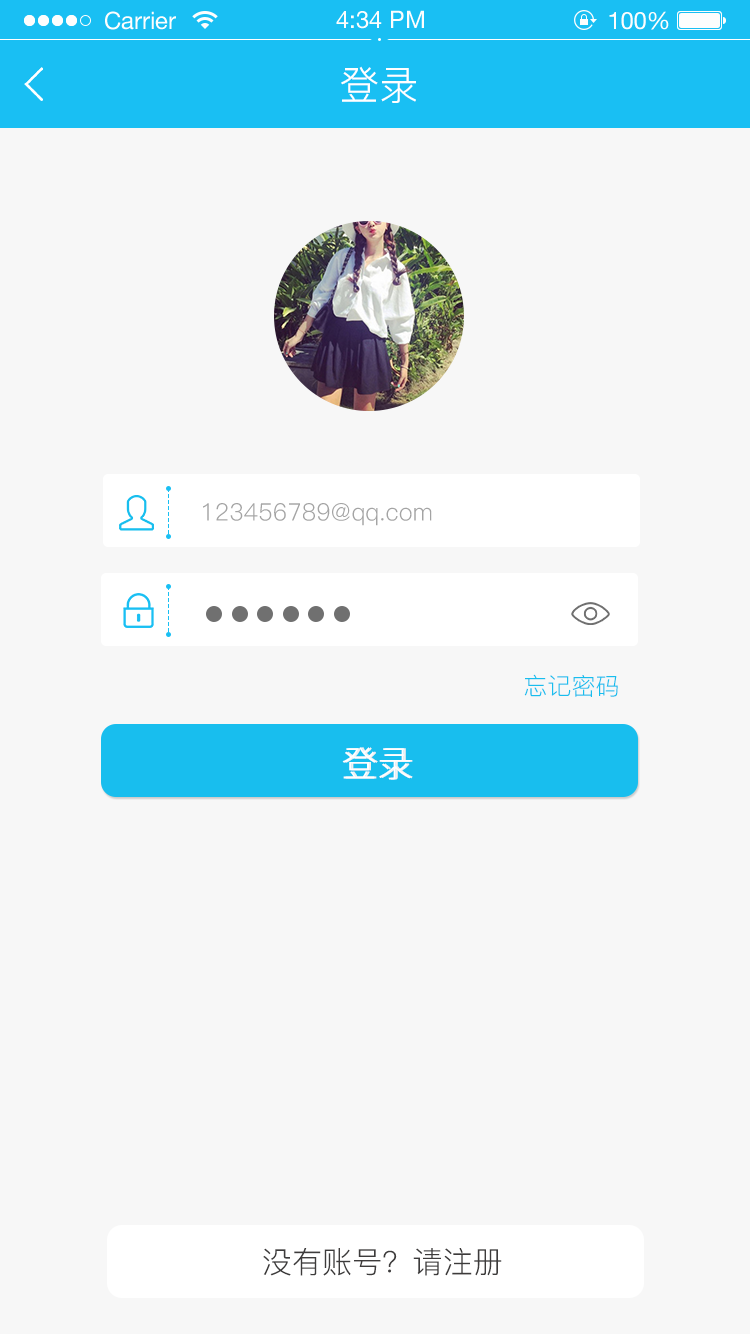
<style>
.page{position:relative;width:750px;height:1334px;background:#f7f7f7}
.page>*{position:absolute;margin:0}
.t1{font:40px "PingFang-SC-Regular";color:#ffffff}
.t2{font:24px "PingFang-SC-Regular";letter-spacing:0.005em;color:#a4a4a4}
.t3{font:24px "PingFang-SC-Regular";letter-spacing:0.005em;color:#18beee}
.t4{font:36px "PingFang-SC-Regular";color:#ffffff}
.t5{font:36px "PingFang-SC-Regular";color:#f2f1f1}
.t6{font:30px "PingFang-SC-Regular";letter-spacing:0.005em;color:#3d3b3b}
</style>
<div class="page">
<p class="t1" style="left:341px;top:66px;width:75px;height:37px">登录</p>
<p class="t2" style="left:203px;top:503px;width:229px;height:23px">123456789@qq.com</p>
<p class="t3" style="left:524px;top:674px;width:94px;height:23px">忘记密码</p>
<p class="t4" style="left:342px;top:747px;width:69px;height:33px">登录</p>
<p class="t5" style="left:344px;top:747px;width:69px;height:33px">登录</p>
<p class="t6" style="left:263px;top:1248px;width:239px;height:28px">没有账号？请注册</p>
</div>
